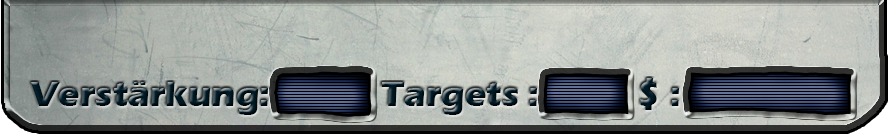
<style>
.page{position:relative;width:889px;height:135px}
.page>*{position:absolute;margin:0}
.t1{font:36px "ErasITC-Bold";color:#001924}
.t2{font:36px "ErasITC-Bold"}
</style>
<div class="page">
<p class="t1" style="left:640px;top:78px;width:39px;height:32px">$ :</p>
<p class="t2" style="left:30px;top:82px;width:238px;height:33px">Verstärkung:</p>
<p class="t2" style="left:381px;top:82px;width:156px;height:33px">Targets :</p>
</div>
